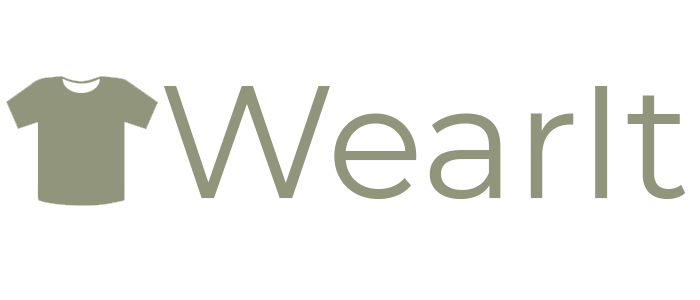
<style>
.page{position:relative;width:700px;height:300px;background:#ffffff}
.page>*{position:absolute;margin:0}
.t1{font:159.9px "Montserrat-Regular";color:#91967c}
</style>
<div class="page">
<p class="t1" style="left:163px;top:86px;width:523px;height:113px">WearIt</p>
</div>
